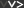
<style>
.page{position:relative;width:24px;height:8px;background:#333333}
.page>*{position:absolute;margin:0}
.t1{font:15.4px "PTSans-Caption";color:#4e4d49;text-transform:uppercase;scale:0.94 1}
.t2{font:15.4px "PTSans-Caption";color:#ffffff;text-transform:uppercase;scale:0.94 1}
</style>
<div class="page">
<p class="t1" style="left:0px;top:0px;width:8px;height:8px;rotate:90deg">&gt;</p>
<p class="t2" style="left:8px;top:0px;width:8px;height:8px;rotate:90deg">&gt;</p>
<p class="t2" style="left:16px;top:1px;width:8px;height:7px">&gt;</p>
</div>
